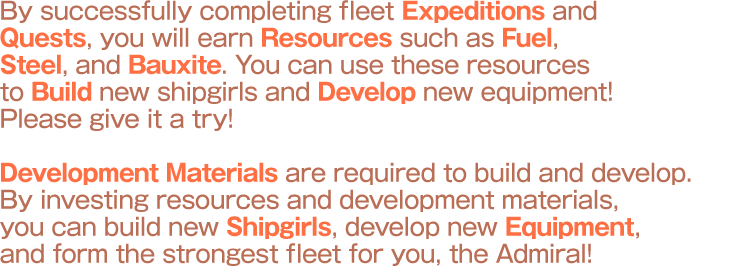
<style>
.page{position:relative;width:747px;height:273px;background:#ffffff}
.page>*{position:absolute;margin:0}
.t1{font:24px/27px "GothicMB101Pro-Medium";letter-spacing:-0.02em;color:#ba6e56;scale:0.95 1}
.t2{font:24px/27px "GothicMB101Pro-Bold";letter-spacing:-0.02em;color:#ff6f44;scale:0.95 1}
</style>
<div class="page">
<p class="t1" style="left:0px;top:0px;width:691px;height:266px">By successfully completing fleet <span class="t2">Expeditions</span> and<br><span class="t2">Quests</span>, you will earn <span class="t2">Resources</span> such as <span class="t2">Fuel</span>,<br><span class="t2">Steel</span>, and <span class="t2">Bauxite</span>. You can use these resources<br>to <span class="t2">Build</span> new shipgirls and <span class="t2">Develop</span> new equipment!<br>Please give it a try!<br><br><span class="t2">Development Materials</span> are required to build and develop.<br>By investing resources and development materials,<br>you can build new <span class="t2">Shipgirls</span>, develop new <span class="t2">Equipment</span>,<br>and form the strongest fleet for you, the Admiral!</p>
</div>
